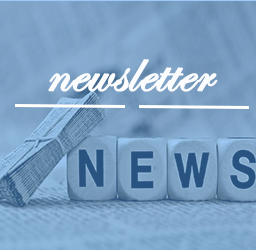
<style>
.page{position:relative;width:256px;height:250px}
.page>*{position:absolute;margin:0}
.t1{font:60px "EdwardianScriptITC";color:#fafcfe;font-weight:bold}
</style>
<div class="page">
<p class="t1" style="left:48px;top:59px;width:170px;height:33px">newsletter</p>
</div>
